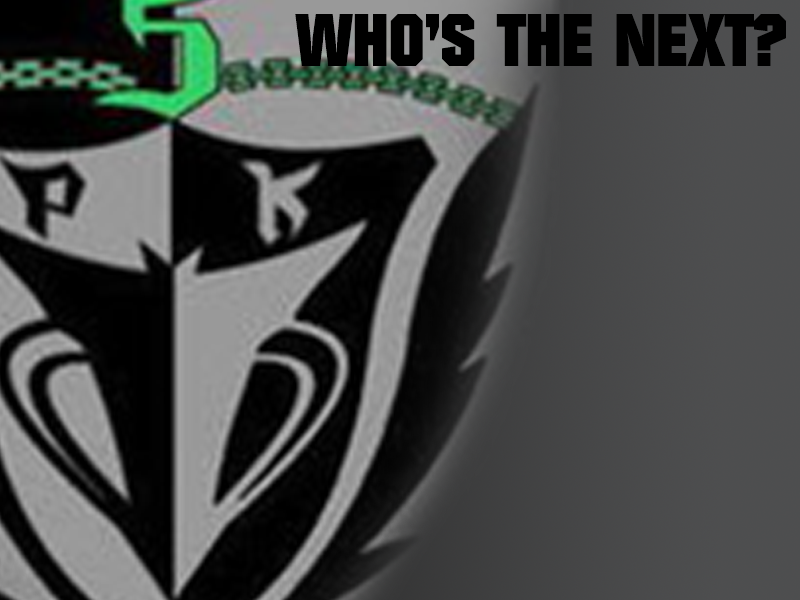
<style>
.page{position:relative;width:800px;height:600px}
.page>*{position:absolute;margin:0}
.t1{font:72px "Autumn";color:#000000}
</style>
<div class="page">
<p class="t1" style="left:295px;top:14px;width:491px;height:52px">WHO’S THE NEXT?</p>
</div>
